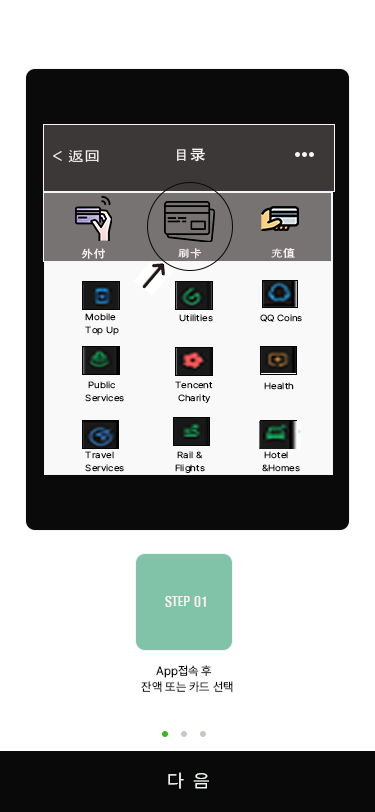
<style>
.page{position:relative;width:375px;height:812px;background:#ffffff}
.page>*{position:absolute;margin:0}
.t1{font:14.2px "Gulim";color:#faf5f5;scale:1.14 1}
.t2{font:14.2px "AdobeHeitiStd-Regular";color:#faf5f5;scale:1.14 1}
.t3{font:10.6px "AdobeHeitiStd-Regular";color:#f7efef;scale:1.14 1}
.t4{font:10.6px "Gulim";color:#f7efef;scale:1.14 1}
.t5{font:8.9px/13.1px "Pretendard-Regular";color:#090909;scale:1.14 1}
.t6{font:8.9px "Pretendard-Regular";color:#090909;scale:1.14 1}
.t7{font:12px "H2hdrM";color:#f6f0f0}
.t8{font:12px/16px "Pretendard-Regular";color:#0b0a0a}
.t9{font:11px/14.7px "H2hdrM";color:#0b0a0a}
.t10{font:18px "Pretendard-Regular";color:#f2f6f2;scale:1.07 1}
</style>
<div class="page">
<p class="t1" style="left:53px;top:150px;width:46px;height:13px">&lt; 返回</p>
<p class="t1" style="left:177px;top:148px;width:28px;height:14px">目<span class="t2">录</span></p>
<p class="t3" style="left:81px;top:248px;width:24px;height:11px">外付</p>
<p class="t4" style="left:178px;top:248px;width:24px;height:11px">刷卡</p>
<p class="t4" style="left:271px;top:248px;width:24px;height:10px">充<span class="t3">值</span></p>
<p class="t5" style="left:85px;top:313px;width:34px;height:22px">Mobile <br>Top Up</p>
<p class="t6" style="left:179px;top:314px;width:34px;height:8px">Utilities</p>
<p class="t6" style="left:260px;top:314px;width:42px;height:8px">QQ Coins</p>
<p class="t5" style="left:85px;top:381px;width:39px;height:21px">Public<br>Services</p>
<p class="t5" style="left:175px;top:381px;width:38px;height:22px">Tencent<br>  Charity</p>
<p class="t6" style="left:264px;top:382px;width:30px;height:8px">Health</p>
<p class="t5" style="left:85px;top:451px;width:39px;height:21px">Travel<br>Services</p>
<p class="t5" style="left:175px;top:451px;width:30px;height:22px">Rail &amp;<br>Flights</p>
<p class="t5" style="left:262px;top:451px;width:38px;height:21px">Hotel<br>&amp;Homes</p>
<p class="t7" style="left:165px;top:596px;width:41px;height:11px">STEP 01</p>
<p class="t8" style="left:141px;top:665px;width:92px;height:28px"><span class="t9">    </span>App접속 후<br>잔액 또는 카드 선택</p>
<p class="t10" style="left:168px;top:772px;width:41px;height:17px">다  음</p>
</div>
